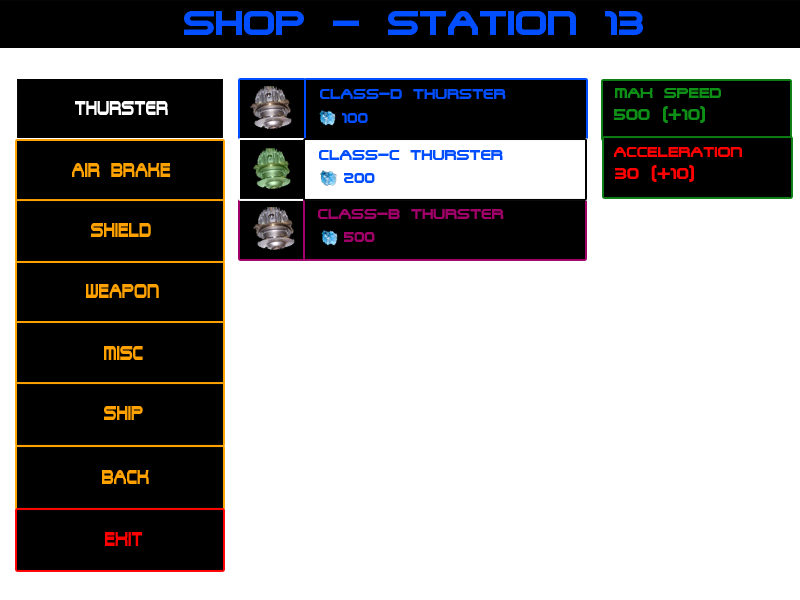
<style>
.page{position:relative;width:800px;height:600px;background:#ffffff}
.page>*{position:absolute;margin:0}
.t1{font:36.6px "TerminatorTwo";color:#004eff;scale:1.09 1}
.t2{font:14.6px "TerminatorTwo";color:#004eff;scale:1.09 1}
.t3{font:14.6px "TerminatorTwo";color:#0e9017;scale:1.09 1}
.t4{font:22px "TerminatorTwo";color:#ffffff;scale:0.74 1}
.t5{font:17.1px "TerminatorTwo";color:#0e9017;scale:1.09 1}
.t6{font:14.6px "TerminatorTwo";color:#ff0000;scale:1.09 1}
.t7{font:22px "TerminatorTwo";color:#ffa200;scale:0.74 1}
.t8{font:17.1px "TerminatorTwo";color:#ff0000;scale:1.09 1}
.t9{font:14.6px "TerminatorTwo";color:#9f0269;scale:1.09 1}
.t10{font:14.6px "TerminatorTwo";color:#9f0169;scale:1.09 1}
.t11{font:22px "TerminatorTwo";color:#ff0000;scale:0.74 1}
</style>
<div class="page">
<p class="t1" style="left:184px;top:11px;width:459px;height:24px">SHOP - STATION 13</p>
<p class="t2" style="left:320px;top:89px;width:186px;height:10px">CLASS-D Thurster</p>
<p class="t3" style="left:615px;top:88px;width:106px;height:10px">MAX SPEED</p>
<p class="t4" style="left:75px;top:101px;width:93px;height:14px">Thurster</p>
<p class="t2" style="left:342px;top:113px;width:26px;height:10px">100</p>
<p class="t5" style="left:613px;top:106px;width:92px;height:17px">500 (+10)</p>
<p class="t2" style="left:319px;top:150px;width:184px;height:10px">CLASS-C Thurster</p>
<p class="t6" style="left:614px;top:147px;width:128px;height:10px">ACCELERATION</p>
<p class="t7" style="left:72px;top:163px;width:99px;height:14px">AIR BRAKE</p>
<p class="t2" style="left:344px;top:173px;width:31px;height:10px">200</p>
<p class="t8" style="left:615px;top:165px;width:79px;height:17px">30 (+10)</p>
<p class="t9" style="left:318px;top:209px;width:186px;height:10px">CLASS-B Thurster</p>
<p class="t7" style="left:91px;top:223px;width:60px;height:14px">SHIELD</p>
<p class="t10" style="left:344px;top:232px;width:31px;height:10px">500</p>
<p class="t7" style="left:86px;top:284px;width:73px;height:14px">WEAPON</p>
<p class="t7" style="left:104px;top:346px;width:39px;height:14px">MISC</p>
<p class="t7" style="left:104px;top:406px;width:39px;height:14px">SHIP</p>
<p class="t7" style="left:102px;top:470px;width:47px;height:14px">BACK</p>
<p class="t11" style="left:105px;top:532px;width:38px;height:14px">EXIT</p>
</div>
